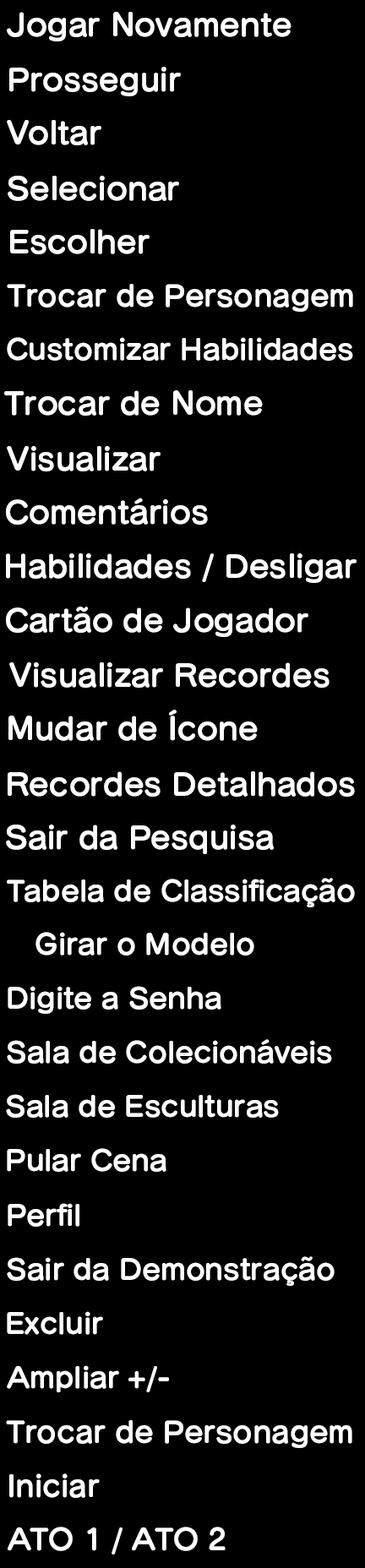
<style>
.page{position:relative;width:365px;height:1568px;background:#000000}
.page>*{position:absolute;margin:0}
.t1{font:30.4px "SeuratPro-B";color:#ffffff}
.t2{font:28.7px "SeuratPro-B";color:#ffffff}
.t3{font:27.9px "SeuratPro-B";color:#ffffff}
</style>
<div class="page">
<p class="t1" style="left:7px;top:12px;width:284px;height:29px">Jogar Novamente</p>
<p class="t1" style="left:9px;top:67px;width:172px;height:29px">Prosseguir</p>
<p class="t1" style="left:7px;top:120px;width:94px;height:25px">Voltar</p>
<p class="t1" style="left:8px;top:176px;width:171px;height:25px">Selecionar</p>
<p class="t1" style="left:10px;top:229px;width:140px;height:25px">Escolher</p>
<p class="t2" style="left:7px;top:284px;width:346px;height:28px">Trocar de Personagem</p>
<p class="t3" style="left:7px;top:337px;width:346px;height:24px">Customizar Habilidades</p>
<p class="t1" style="left:4px;top:390px;width:259px;height:26px">Trocar de Nome</p>
<p class="t1" style="left:7px;top:446px;width:154px;height:25px">Visualizar</p>
<p class="t1" style="left:6px;top:498px;width:202px;height:27px">Comentários</p>
<p class="t1" style="left:6px;top:553px;width:351px;height:30px">Habilidades / Desligar</p>
<p class="t1" style="left:6px;top:607px;width:302px;height:30px">Cartão de Jogador</p>
<p class="t1" style="left:9px;top:662px;width:320px;height:26px">Visualizar Recordes</p>
<p class="t1" style="left:8px;top:710px;width:250px;height:31px">Mudar de Ícone</p>
<p class="t1" style="left:8px;top:771px;width:347px;height:26px">Recordes Detalhados</p>
<p class="t1" style="left:6px;top:825px;width:268px;height:29px">Sair da Pesquisa</p>
<p class="t3" style="left:7px;top:878px;width:348px;height:29px">Tabela de Classificação</p>
<p class="t3" style="left:35px;top:932px;width:219px;height:24px">Girar o Modelo</p>
<p class="t3" style="left:8px;top:986px;width:213px;height:28px">Digite a Senha</p>
<p class="t3" style="left:7px;top:1039px;width:325px;height:25px">Sala de Colecionáveis</p>
<p class="t3" style="left:6px;top:1094px;width:273px;height:24px">Sala de Esculturas</p>
<p class="t3" style="left:7px;top:1148px;width:159px;height:24px">Pular Cena</p>
<p class="t3" style="left:8px;top:1203px;width:71px;height:24px">Perfil</p>
<p class="t3" style="left:7px;top:1256px;width:328px;height:30px">Sair da Demonstração</p>
<p class="t3" style="left:7px;top:1311px;width:96px;height:24px">Excluir</p>
<p class="t3" style="left:7px;top:1365px;width:162px;height:28px">Ampliar +/-</p>
<p class="t2" style="left:6px;top:1420px;width:346px;height:28px">Trocar de Personagem</p>
<p class="t2" style="left:9px;top:1473px;width:91px;height:25px">Iniciar</p>
<p class="t2" style="left:8px;top:1527px;width:218px;height:27px">ATO 1 / ATO 2</p>
</div>
